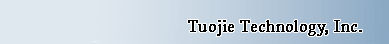
<style>
.page{position:relative;width:389px;height:44px;background:#e0e8ef}
.page>*{position:absolute;margin:0}
.t1{font:16.5px "CalistoMT";letter-spacing:0.01em;color:#000000;font-weight:bold;scale:0.91 1}
</style>
<div class="page">
<p class="t1" style="left:188px;top:20px;width:174px;height:16px">Tuojie Technology, Inc.</p>
</div>
